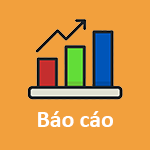
<style>
.page{position:relative;width:150px;height:150px;background:#f2a03d}
.page>*{position:absolute;margin:0}
.t1{font:23.7px "Calibri-Bold";color:#ffffff}
</style>
<div class="page">
<p class="t1" style="left:38px;top:111px;width:75px;height:16px">Báo cáo</p>
</div>
